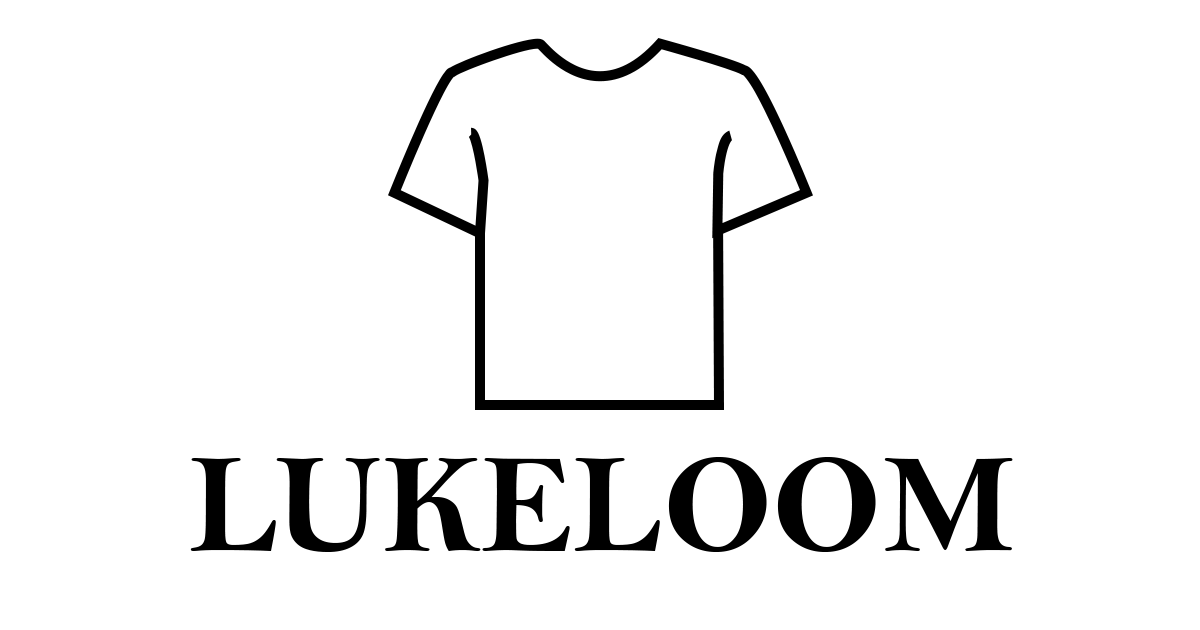
<style>
.page{position:relative;width:1200px;height:630px;background:#ffffff}
.page>*{position:absolute;margin:0}
.t1{font:141.5px "BellMTBold";color:#000000}
</style>
<div class="page">
<p class="t1" style="left:190px;top:457px;width:823px;height:95px">LUKELOOM</p>
</div>
